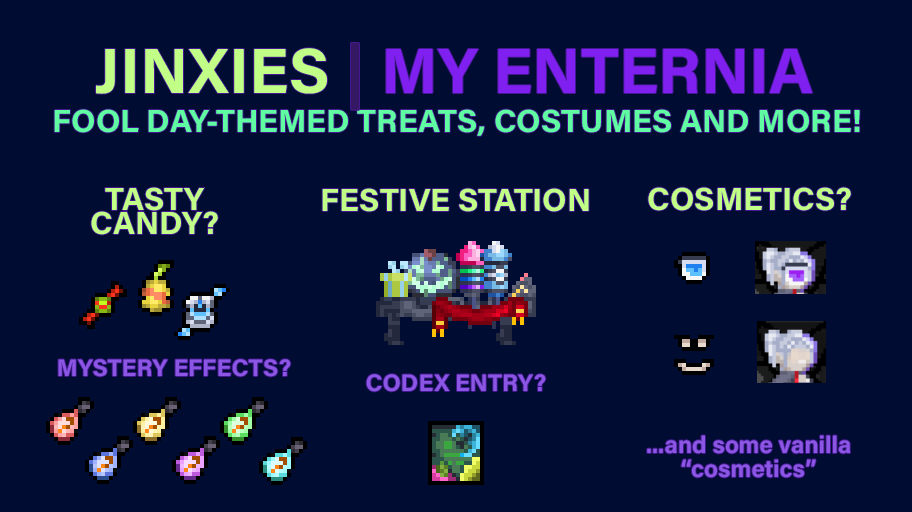
<style>
.page{position:relative;width:912px;height:512px;background:#000c32}
.page>*{position:absolute;margin:0}
.t1{font:64px "AcuminConcept-Bold";color:#8020f0}
.t2{font:64px "AcuminConcept-Bold";color:#c2ff87}
.t3{font:64px "AcuminConcept-Bold";color:#341863}
.t4{font:32px "AcuminConcept-Bold";color:#60fca2}
.t5{font:32px/24px "AcuminConcept-Bold";color:#c2ff87}
.t6{font:32px "AcuminConcept-Bold";color:#c2ff87}
.t7{font:24px "AcuminConcept-Bold";color:#8a56e3}
.t8{font:24px/24px "AcuminConcept-Bold";color:#8a56e3}
</style>
<div class="page">
<p class="t1" style="left:96px;top:43px;width:717px;height:67px"><span class="t2">JINXIES </span><span class="t3">| </span>MY ENTERNIA</p>
<p class="t4" style="left:54px;top:109px;width:806px;height:27px">FOOL DAY-THEMED TREATS, COSTUMES AND MORE!</p>
<p class="t5" style="left:91px;top:187px;width:127px;height:48px;text-align:center">TASTY<br>CANDY?</p>
<p class="t6" style="left:322px;top:188px;width:267px;height:24px">FESTIVE STATION</p>
<p class="t6" style="left:648px;top:187px;width:203px;height:24px">COSMETICS?</p>
<p class="t7" style="left:58px;top:359px;width:233px;height:18px">MYSTERY EFFECTS?</p>
<p class="t7" style="left:366px;top:374px;width:180px;height:18px">CODEX ENTRY?</p>
<p class="t8" style="left:647px;top:435px;width:203px;height:43px;text-align:center">...and some vanilla<br>“cosmetics”</p>
</div>
